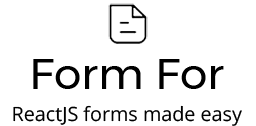
<style>
.page{position:relative;width:256px;height:126px;background:#ffffff}
.page>*{position:absolute;margin:0}
.t1{font:43.8px "Montserrat-Regular";color:#000000}
.t2{font:19.7px "OpenSans-Regular";color:#000000}
</style>
<div class="page">
<p class="t1" style="left:33px;top:59px;width:191px;height:30px">Form For</p>
<p class="t2" style="left:13px;top:105px;width:229px;height:21px">ReactJS forms made easy</p>
</div>
